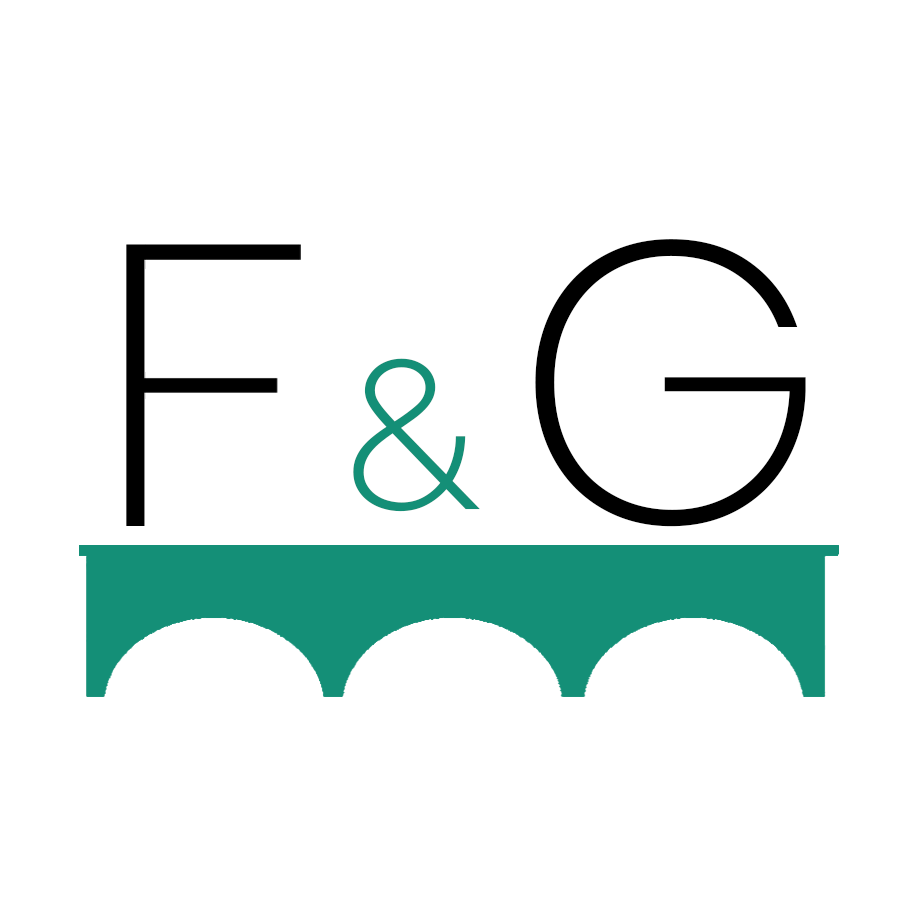
<style>
.page{position:relative;width:900px;height:900px;background:#ffffff}
.page>*{position:absolute;margin:0}
.t1{font:399.2px "Poppins-ExtraLight";color:#000000}
.t2{font:208.8px "Raleway-Light";color:#148f77}
</style>
<div class="page">
<p class="t1" style="left:535px;top:239px;width:271px;height:288px">G</p>
<p class="t2" style="left:353px;top:358px;width:127px;height:154px">&amp;</p>
</div>
